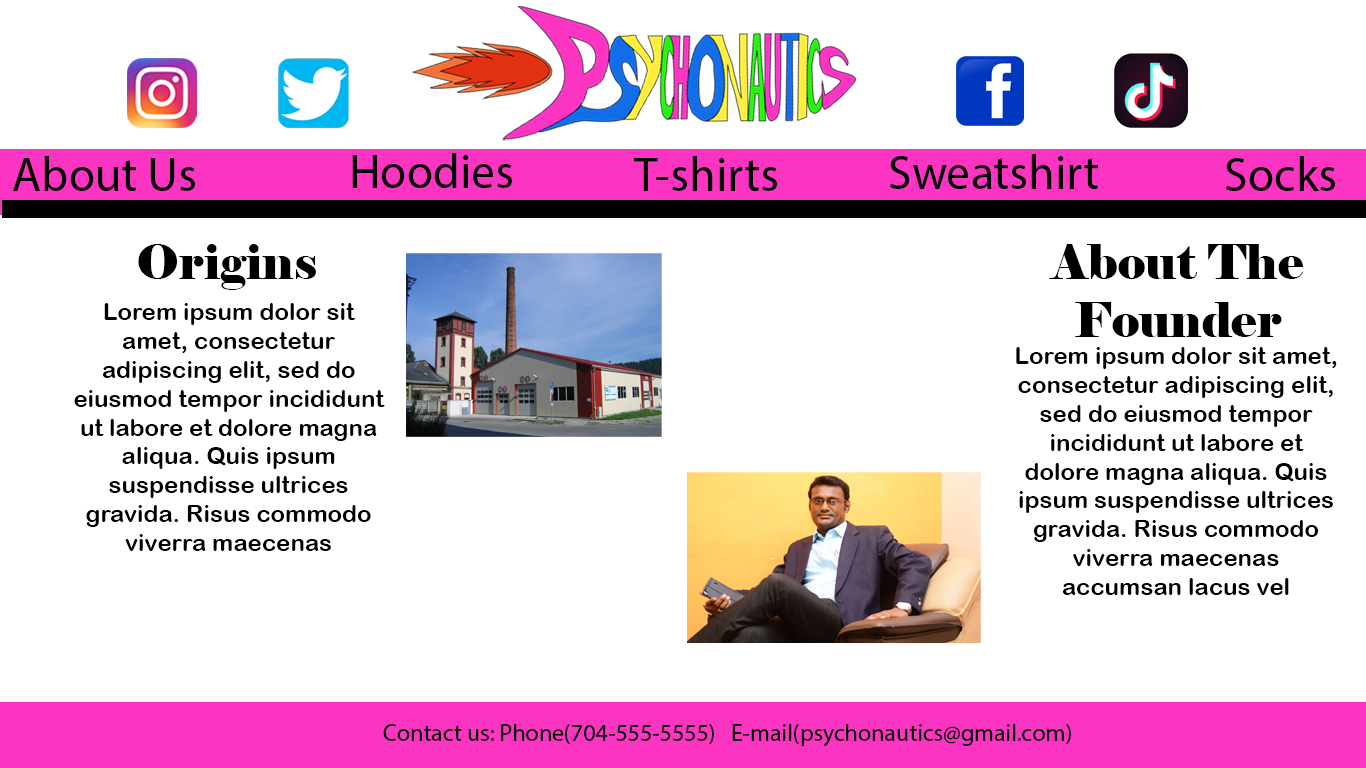
<style>
.page{position:relative;width:1366px;height:768px;background:#ffffff}
.page>*{position:absolute;margin:0}
.t1{font:48px "MyriadPro-Regular";color:#000000}
.t2{font:48px "Elephant-Regular";color:#000000}
.t3{font:24px "ArialRoundedMTBold";color:#000000}
.t4{font:24px "MyriadPro-Regular";color:#000000}
</style>
<div class="page">
<p class="t1" style="left:13px;top:156px;width:182px;height:35px">About Us</p>
<p class="t1" style="left:352px;top:153px;width:160px;height:35px">Hoodies</p>
<p class="t1" style="left:634px;top:156px;width:143px;height:35px">T-shirts</p>
<p class="t1" style="left:890px;top:154px;width:208px;height:35px">Sweatshirt</p>
<p class="t1" style="left:1226px;top:156px;width:109px;height:35px">Socks</p>
<p class="t2" style="left:138px;top:244px;width:178px;height:46px">Origins</p>
<p class="t2" style="left:1049px;top:244px;width:254px;height:93px;text-align:center">About The Founder</p>
<p class="t3" style="left:74px;top:303px;width:311px;height:248px;text-align:center">Lorem ipsum dolor sit amet, consectetur adipiscing elit, sed do eiusmod tempor incididunt ut labore et dolore magna aliqua. Quis ipsum suspendisse ultrices gravida. Risus commodo viverra maecenas accumsan lacus vel facilisis.</p>
<p class="t3" style="left:1016px;top:347px;width:321px;height:248px;text-align:center">Lorem ipsum dolor sit amet, consectetur adipiscing elit, sed do eiusmod tempor incididunt ut labore et dolore magna aliqua. Quis ipsum suspendisse ultrices gravida. Risus commodo viverra maecenas accumsan lacus vel facilisis.</p>
<p class="t4" style="left:383px;top:724px;width:688px;height:22px">Contact us: Phone(704-555-5555)   E-mail(psychonautics@gmail.com)</p>
</div>
